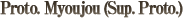
<style>
.page{position:relative;width:184px;height:19px;background:#ffffff}
.page>*{position:absolute;margin:0}
.t1{font:17px "RyuminPro-ExBold";letter-spacing:-0.08em;color:#4a3f32;font-weight:bold;scale:0.89 1}
</style>
<div class="page">
<p class="t1" style="left:0px;top:1px;width:183px;height:17px">Proto. Myoujou (Sup. Proto.)</p>
</div>
